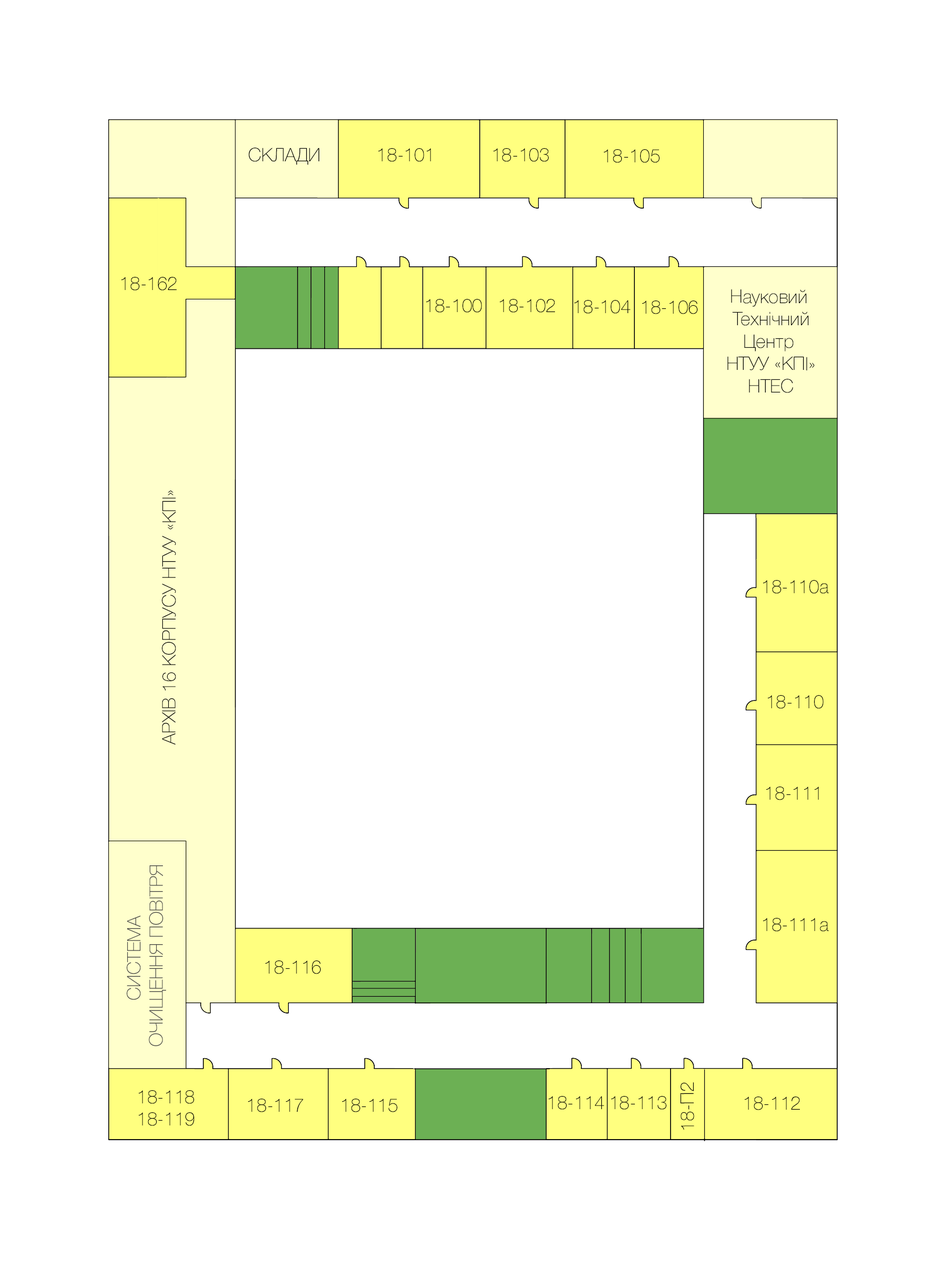
<style>
.page{position:relative;width:946px;height:1261px;background:#ffffff}
.page>*{position:absolute;margin:0}
.t1{font:18.6px "HelveticaNeue-Thin";color:#000000}
.t2{font:18.6px "HelveticaNeue-Thin";color:#444444}
</style>
<div class="page">
<p class="t1" style="left:249px;top:148px;width:70px;height:17px">СКЛАДИ</p>
<p class="t1" style="left:378px;top:148px;width:53px;height:14px">18-101</p>
<p class="t1" style="left:493px;top:148px;width:55px;height:14px">18-103</p>
<p class="t1" style="left:604px;top:149px;width:55px;height:14px">18-105</p>
<p class="t1" style="left:121px;top:277px;width:56px;height:14px">18-162</p>
<p class="t1" style="left:727px;top:289px;width:87px;height:104px;text-align:center">Науковий <br>Технічний<br>Центр <br>НТУУ «КПІ»<br>НТЕС</p>
<p class="t1" style="left:426px;top:299px;width:56px;height:14px">18-100</p>
<p class="t1" style="left:500px;top:299px;width:55px;height:14px">18-102</p>
<p class="t1" style="left:574px;top:300px;width:56px;height:14px">18-104</p>
<p class="t1" style="left:642px;top:301px;width:56px;height:13px">18-106</p>
<p class="t1" style="left:162px;top:490px;width:14px;height:255px;rotate:-90deg">АРХІВ 16 КОРПУСУ НТУУ «КПІ»</p>
<p class="t1" style="left:763px;top:580px;width:66px;height:14px">18-110а</p>
<p class="t1" style="left:768px;top:695px;width:55px;height:14px">18-110</p>
<p class="t1" style="left:766px;top:786px;width:53px;height:14px">18-111</p>
<p class="t2" style="left:127px;top:865px;width:39px;height:181px;text-align:center;rotate:-90deg">СИСТЕМА <br>ОЧИЩЕННЯ ПОВІТРЯ</p>
<p class="t1" style="left:763px;top:918px;width:66px;height:14px">18-111а</p>
<p class="t1" style="left:265px;top:960px;width:56px;height:14px">18-116</p>
<p class="t1" style="left:680px;top:1082px;width:14px;height:48px;rotate:-90deg">18-П2</p>
<p class="t1" style="left:139px;top:1090px;width:55px;height:36px">18-118<br>18-119</p>
<p class="t1" style="left:548px;top:1096px;width:56px;height:14px">18-114</p>
<p class="t1" style="left:611px;top:1096px;width:55px;height:14px">18-113</p>
<p class="t1" style="left:744px;top:1096px;width:56px;height:14px">18-112</p>
<p class="t1" style="left:248px;top:1099px;width:55px;height:13px">18-117</p>
<p class="t1" style="left:342px;top:1099px;width:55px;height:13px">18-115</p>
</div>
